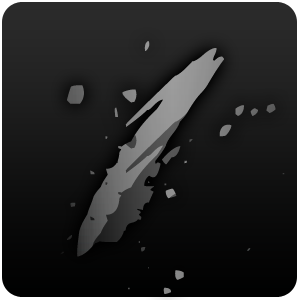
<style>
.page{position:relative;width:300px;height:300px}
.page>*{position:absolute;margin:0}
.t1{font:583.3px "Ginga";letter-spacing:-0.05em}
</style>
<div class="page">
<p class="t1" style="left:60px;top:41px;width:225px;height:253px">1</p>
</div>
